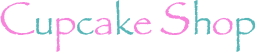
<style>
.page{position:relative;width:256px;height:52px;background:#ffffff}
.page>*{position:absolute;margin:0}
.t1{font:48px "Papyrus";color:#f785db}
.t2{font:36px "Papyrus";color:#57b6b8}
.t3{font:36px "Papyrus";color:#f784db}
.t4{font:48px "Papyrus";color:#f784db}
</style>
<div class="page">
<p class="t1" style="left:0px;top:0px;width:256px;height:52px">C<span class="t2">u</span><span class="t3">p</span><span class="t2">c</span><span class="t3">a</span><span class="t2">k</span><span class="t3">e </span><span class="t4">S</span><span class="t2">h</span><span class="t3">o</span><span class="t2">p</span></p>
</div>
